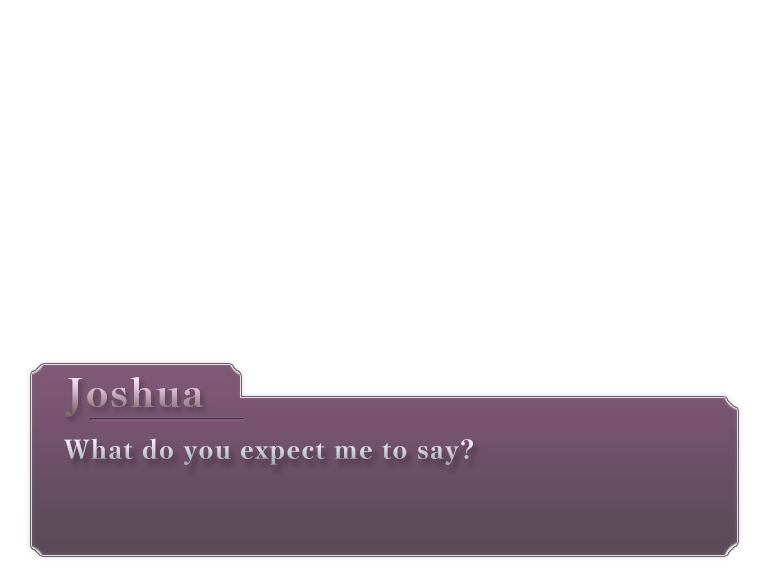
<style>
.page{position:relative;width:768px;height:576px;background:#ffffff}
.page>*{position:absolute;margin:0}
.t1{font:38.8px "YuMin-Extrabold";letter-spacing:0.05em}
.t2{font:25.5px "YuMin-Extrabold";letter-spacing:0.05em;color:#cacbd7}
</style>
<div class="page">
<p class="t1" style="left:65px;top:377px;width:139px;height:40px">Joshua</p>
<p class="t2" style="left:64px;top:438px;width:409px;height:27px">What do you expect me to say?</p>
</div>
